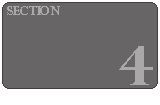
<style>
.page{position:relative;width:160px;height:105px;background:#676565}
.page>*{position:absolute;margin:0}
.t1{font:11.9px "PerpetuaTitlingMT-Bold";color:#aaa8a8}
.t2{font:54.4px "PerpetuaTitlingMT-Bold";color:#aaa8a8}
</style>
<div class="page">
<p class="t1" style="left:7px;top:6px;width:53px;height:9px">Section</p>
<p class="t2" style="left:119px;top:46px;width:34px;height:39px">4</p>
</div>
